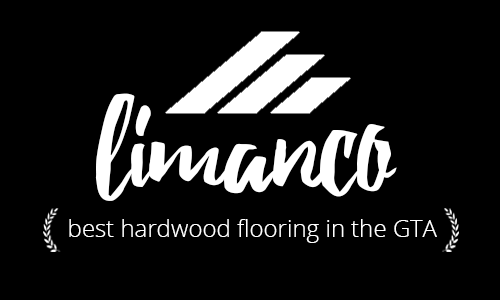
<style>
.page{position:relative;width:500px;height:300px;background:#000000}
.page>*{position:absolute;margin:0}
.t1{font:144px "Debby";color:#ffffff}
.t2{font:24px "OpenSans-Light";color:#ffffff}
</style>
<div class="page">
<p class="t1" style="left:95px;top:93px;width:302px;height:108px">limanco</p>
<p class="t2" style="left:69px;top:219px;width:368px;height:24px">best hardwood flooring in the GTA</p>
</div>
